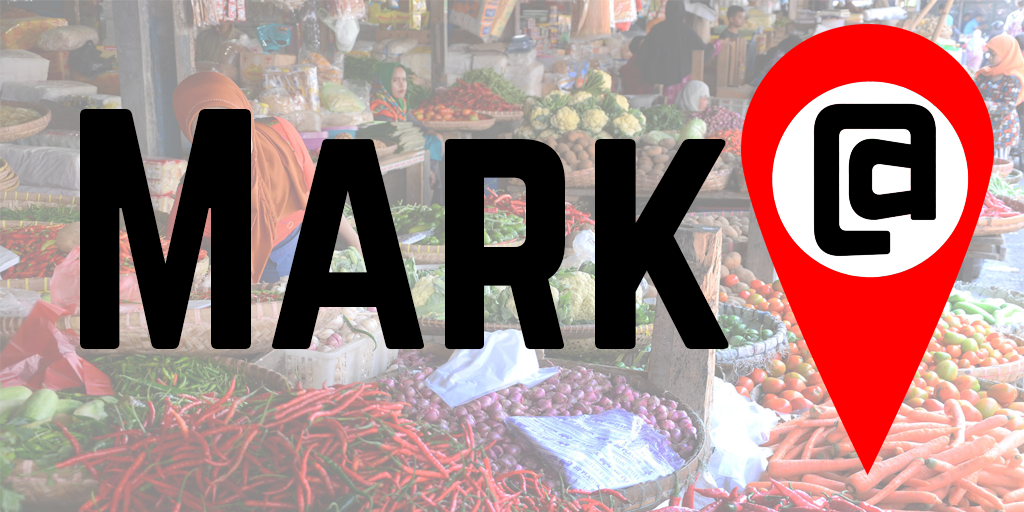
<style>
.page{position:relative;width:1024px;height:512px}
.page>*{position:absolute;margin:0}
.t1{font:300px "Norwester-Regular";color:#000000}
</style>
<div class="page">
<p class="t1" style="left:80px;top:109px;width:649px;height:241px">Mark</p>
</div>
